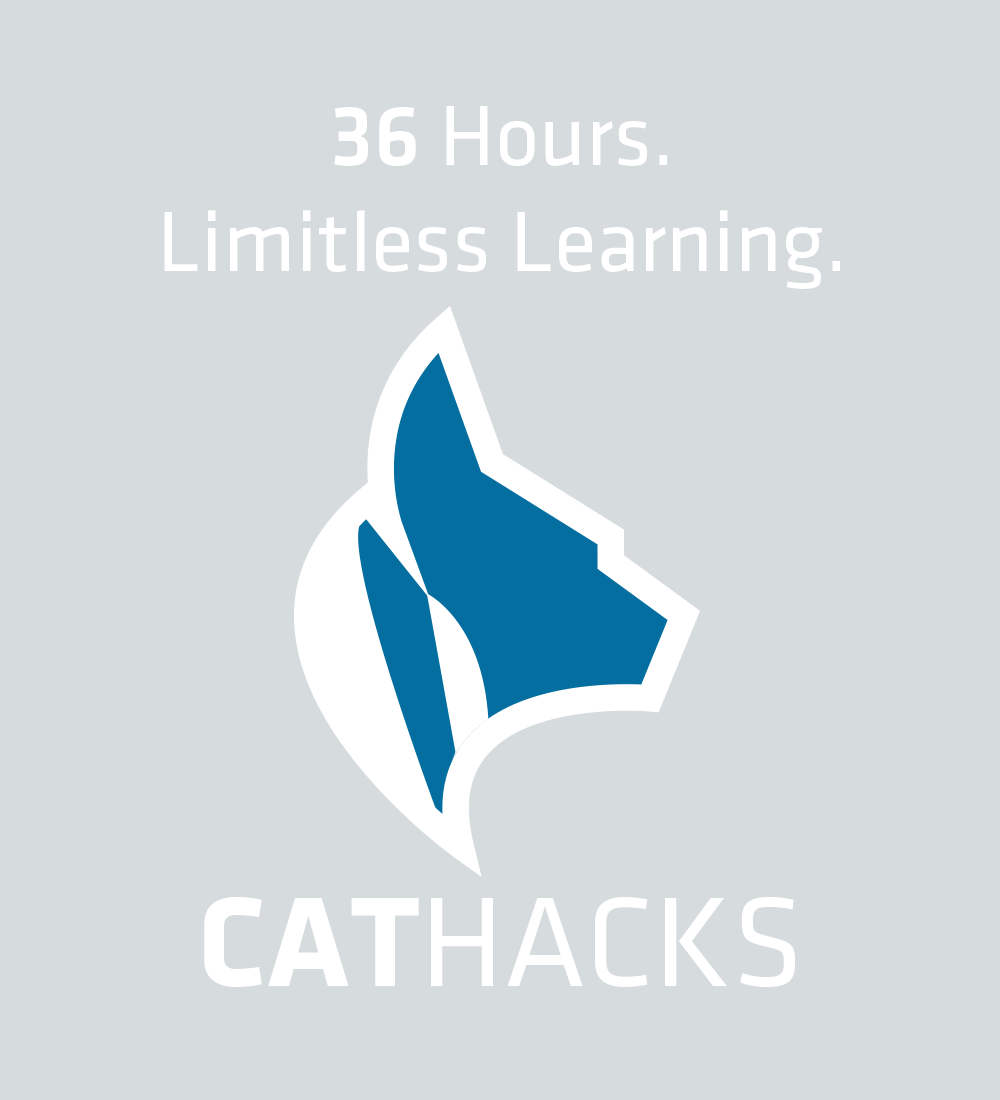
<style>
.page{position:relative;width:1000px;height:1100px;background:#d6dbdd}
.page>*{position:absolute;margin:0}
.t1{font:88px "KlavikaRegular-OSTF";color:#ffffff}
.t2{font:88px "KlavikaMedium-Plain";color:#ffffff}
.t3{font:132px "KlavikaRegCaps-SC";color:#ffffff}
.t4{font:132px "KlavikaBoldCaps-SC";color:#ffffff}
</style>
<div class="page">
<p class="t1" style="left:164px;top:106px;width:676px;height:183px;text-align:center"><span class="t2">36</span> Hours.<br>Limitless Learning.</p>
<p class="t3" style="left:204px;top:896px;width:591px;height:92px"><span class="t4">CAT</span>HACKS</p>
</div>
